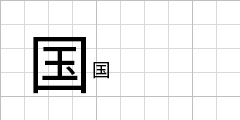
<style>
.page{position:relative;width:240px;height:120px;background:#ffffff}
.page>*{position:absolute;margin:0}
.t1{font:64px "NotoSansCJKjp-Regular";color:#000000}
.t2{font:32px "NotoSansCJKjp-Regular";color:#000000}
</style>
<div class="page">
<p class="t1" style="left:33px;top:37px;width:76px;height:57px">国<span class="t2">国</span></p>
</div>
